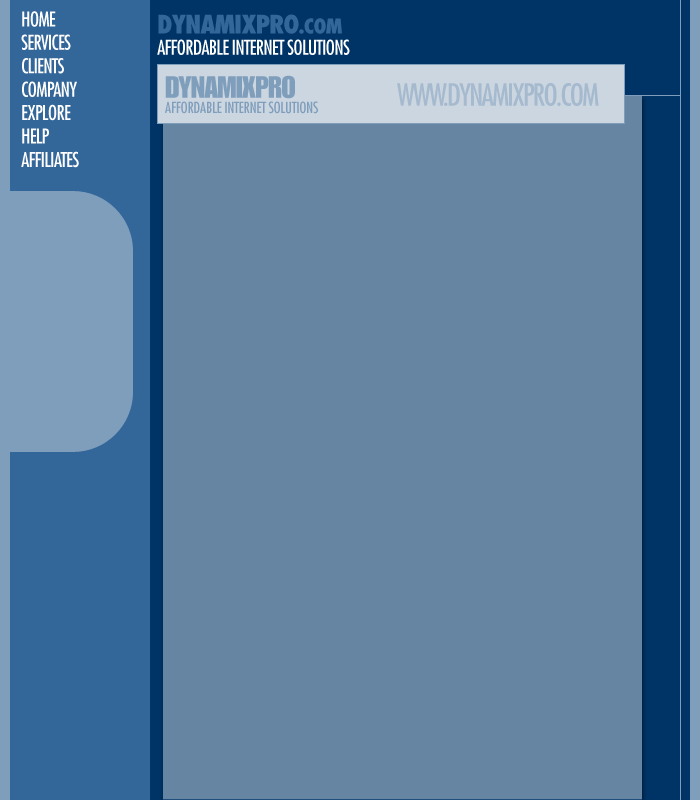
<style>
.page{position:relative;width:700px;height:800px;background:#6685a3}
.page>*{position:absolute;margin:0}
.t1{font:20px/23.4px "Futura-Condensed";letter-spacing:-0.04em;color:#ffffff}
.t2{font:20px/21.4px "Futura-Condensed";letter-spacing:-0.04em;color:#ffffff}
.t3{font:25px/25.4px "Futura-CondensedExtraBold";letter-spacing:-0.04em;color:#336699}
.t4{font:20px/25.4px "Futura-CondensedExtraBold";letter-spacing:-0.04em;color:#336699}
</style>
<div class="page">
<p class="t1" style="left:21px;top:11px;width:58px;height:157px">HOME<br>SERVICES<br>CLIENTS<br>COMPANY<br>EXPLORE<br>HELP<br>AFFILIATES</p>
<p class="t2" style="left:157px;top:14px;width:193px;height:41px"><span class="t3">DYNAMIXPRO</span><span class="t4">.COM   <br></span>AFFORDABLE INTERNET SOLUTIONS</p>
</div>
